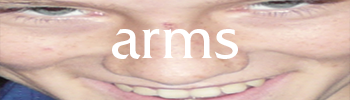
<style>
.page{position:relative;width:350px;height:100px}
.page>*{position:absolute;margin:0}
.t1{font:60px "FrizQuadrataStd";color:#ffffff}
</style>
<div class="page">
<p class="t1" style="left:112px;top:29px;width:126px;height:30px">arms</p>
</div>
